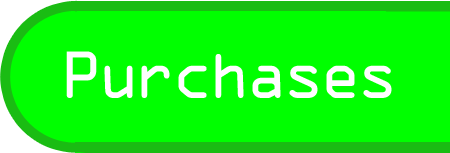
<style>
.page{position:relative;width:450px;height:153px;background:#00ff00}
.page>*{position:absolute;margin:0}
.t1{font:59.8px "OCRAStd";letter-spacing:-0.1em;color:#ffffff}
</style>
<div class="page">
<p class="t1" style="left:66px;top:51px;width:326px;height:47px">Purchases</p>
</div>
